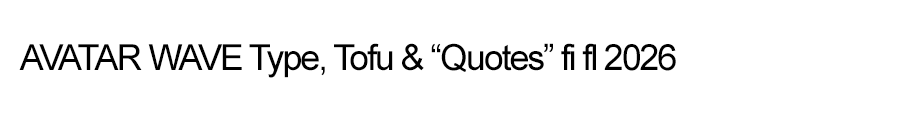
<style>
.page{position:relative;width:900px;height:120px;background:#ffffff}
.page>*{position:absolute;margin:0}
.t1{font:36px "ArialMT";letter-spacing:-0.06em;color:#000000}
</style>
<div class="page">
<p class="t1" style="left:19px;top:43px;width:657px;height:35px">AVATAR WAVE Type, Tofu &amp; “Quotes” fi fl 2026</p>
</div>
